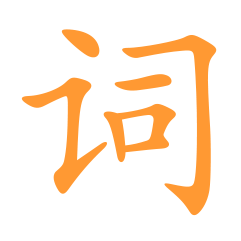
<style>
.page{position:relative;width:241px;height:241px;background:#ffffff}
.page>*{position:absolute;margin:0}
.t1{font:240px "AdobeKaitiStd-Regular";color:#ff9933}
</style>
<div class="page">
<p class="t1" style="left:21px;top:29px;width:196px;height:187px">词</p>
</div>
